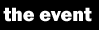
<style>
.page{position:relative;width:99px;height:30px;background:#000000}
.page>*{position:absolute;margin:0}
.t1{font:19.9px "FranklinGothic-Heavy";color:#ffffff}
</style>
<div class="page">
<p class="t1" style="left:3px;top:7px;width:89px;height:15px">the event</p>
</div>
